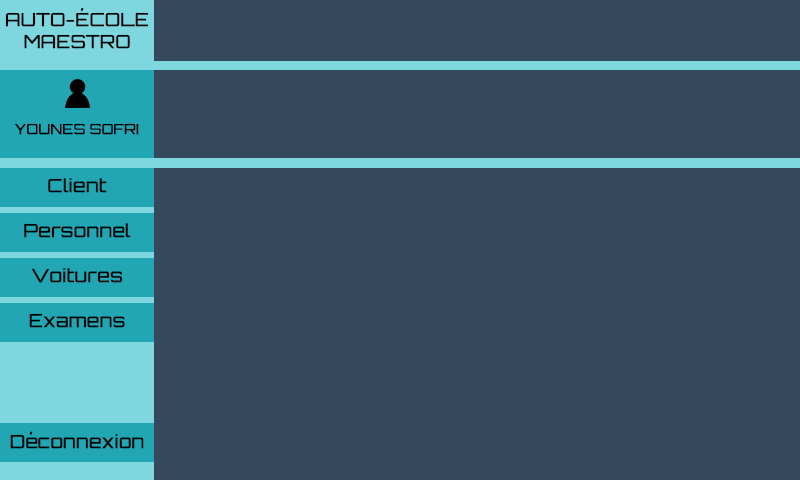
<style>
.page{position:relative;width:800px;height:480px;background:#34495e}
.page>*{position:absolute;margin:0}
.t1{font:18px "Orbitron-Regular";color:#000000;text-transform:uppercase;font-weight:bold}
.t2{font:14px "Orbitron-Regular";color:#000000;text-transform:uppercase;font-weight:bold}
.t3{font:18px "Orbitron-Regular";color:#000000;font-weight:bold}
</style>
<div class="page">
<p class="t1" style="left:5px;top:7px;width:144px;height:42px;text-align:justify">Auto-école<br>MAESTRO</p>
<p class="t2" style="left:15px;top:123px;width:124px;height:12px">Younes Sofri</p>
<p class="t3" style="left:48px;top:178px;width:59px;height:15px">Client</p>
<p class="t3" style="left:24px;top:223px;width:107px;height:15px">Personnel</p>
<p class="t3" style="left:32px;top:268px;width:91px;height:15px">Voitures</p>
<p class="t3" style="left:29px;top:313px;width:96px;height:15px">Examens</p>
<p class="t3" style="left:10px;top:431px;width:134px;height:18px">Déconnexion</p>
</div>
